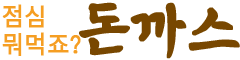
<style>
.page{position:relative;width:240px;height:60px;background:#ffffff}
.page>*{position:absolute;margin:0}
.t1{font:24px "SpoqaHanSans-Regular";color:#f59e23;font-weight:bold}
.t2{font:60px "EBSJSKBold";color:#784700;font-weight:bold}
</style>
<div class="page">
<p class="t1" style="left:2px;top:4px;width:79px;height:52px">점심 <br>뭐먹죠?</p>
<p class="t2" style="left:79px;top:2px;width:161px;height:57px">돈까스</p>
</div>
